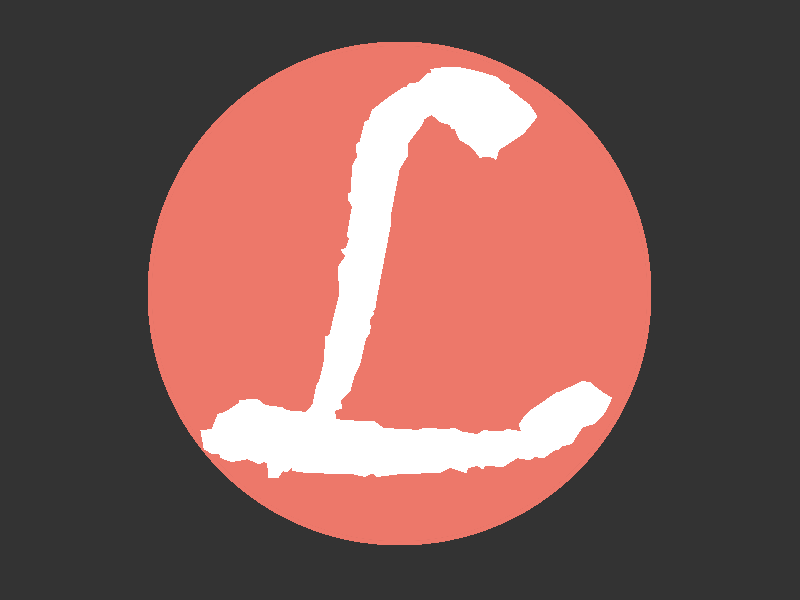
<style>
.page{position:relative;width:800px;height:600px;background:#333333}
.page>*{position:absolute;margin:0}
.t1{font:558.2px "VinerHandITC";color:#ffffff}
</style>
<div class="page">
<p class="t1" style="left:200px;top:67px;width:412px;height:411px">L</p>
</div>
